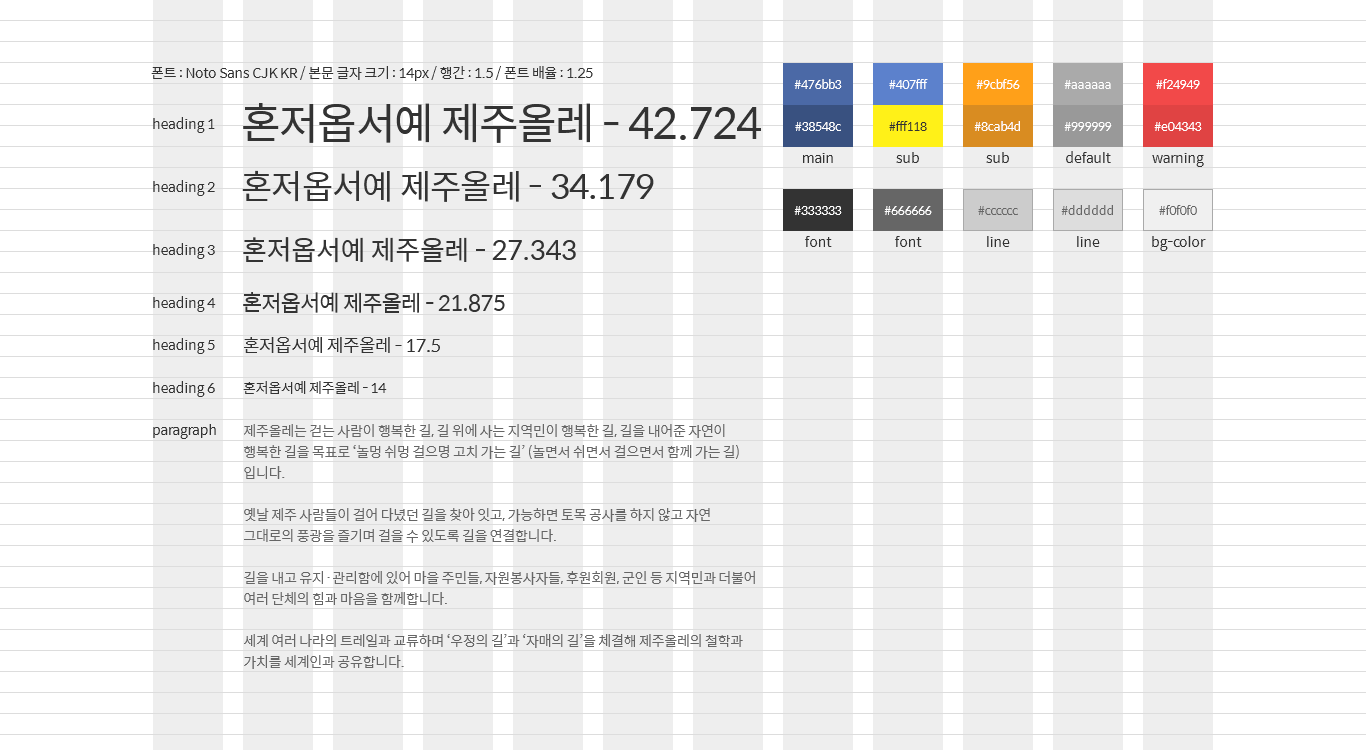
<style>
.page{position:relative;width:1366px;height:750px;background:#eeeeee}
.page>*{position:absolute;margin:0}
.t1{font:14px "SpoqaHanSans-Regular";letter-spacing:-0.025em;color:#333333}
.t2{font:12px "SpoqaHanSans-Regular";letter-spacing:-0.025em;color:#ffffff}
.t3{font:42.7px "SpoqaHanSans-Regular";letter-spacing:-0.025em;color:#333333}
.t4{font:12px "SpoqaHanSans-Regular";letter-spacing:-0.025em;color:#333333}
.t5{font:34.2px "SpoqaHanSans-Regular";letter-spacing:-0.025em;color:#333333}
.t6{font:12px "SpoqaHanSans-Regular";letter-spacing:-0.025em;color:#666666}
.t7{font:27.3px "SpoqaHanSans-Regular";letter-spacing:-0.025em;color:#333333}
.t8{font:21.9px "SpoqaHanSans-Regular";letter-spacing:-0.025em;color:#333333}
.t9{font:17.5px "SpoqaHanSans-Regular";letter-spacing:-0.025em;color:#333333}
.t10{font:14px "SpoqaHanSans-Regular";letter-spacing:-0.025em;color:#666666}
</style>
<div class="page">
<p class="t1" style="left:151px;top:66px;width:442px;height:15px">폰트 : Noto Sans CJK KR / 본문 글자 크기 : 14px / 행간 : 1.5 / 폰트 배율 : 1.25</p>
<p class="t2" style="left:794px;top:79px;width:48px;height:10px">#476bb3</p>
<p class="t2" style="left:889px;top:79px;width:39px;height:10px">#407fff</p>
<p class="t2" style="left:976px;top:79px;width:44px;height:10px">#9cbf56</p>
<p class="t2" style="left:1064px;top:80px;width:47px;height:9px">#aaaaaa</p>
<p class="t2" style="left:1156px;top:79px;width:44px;height:10px">#f24949</p>
<p class="t3" style="left:243px;top:103px;width:518px;height:40px">혼저옵서예 제주올레 - 42.724</p>
<p class="t1" style="left:153px;top:117px;width:62px;height:16px">heading 1</p>
<p class="t2" style="left:795px;top:122px;width:46px;height:9px">#38548c</p>
<p class="t4" style="left:889px;top:121px;width:38px;height:10px">#fff118</p>
<p class="t2" style="left:974px;top:121px;width:46px;height:10px">#8cab4d</p>
<p class="t2" style="left:1064px;top:122px;width:48px;height:9px">#999999</p>
<p class="t2" style="left:1154px;top:122px;width:48px;height:9px">#e04343</p>
<p class="t1" style="left:803px;top:153px;width:30px;height:10px">main</p>
<p class="t1" style="left:896px;top:152px;width:23px;height:11px">sub</p>
<p class="t1" style="left:986px;top:152px;width:23px;height:11px">sub</p>
<p class="t1" style="left:1066px;top:151px;width:45px;height:12px">default</p>
<p class="t1" style="left:1152px;top:153px;width:52px;height:14px">warning</p>
<p class="t5" style="left:242px;top:170px;width:412px;height:32px">혼저옵서예 제주올레 - 34.179</p>
<p class="t1" style="left:153px;top:180px;width:62px;height:16px">heading 2</p>
<p class="t2" style="left:794px;top:206px;width:48px;height:9px">#333333</p>
<p class="t2" style="left:884px;top:206px;width:48px;height:9px">#666666</p>
<p class="t6" style="left:978px;top:206px;width:40px;height:9px">#cccccc</p>
<p class="t6" style="left:1061px;top:205px;width:52px;height:10px">#dddddd</p>
<p class="t6" style="left:1159px;top:205px;width:38px;height:10px">#f0f0f0</p>
<p class="t1" style="left:153px;top:243px;width:62px;height:16px">heading 3</p>
<p class="t7" style="left:243px;top:237px;width:333px;height:26px">혼저옵서예 제주올레 - 27.343</p>
<p class="t1" style="left:805px;top:236px;width:27px;height:11px">font</p>
<p class="t1" style="left:895px;top:236px;width:27px;height:11px">font</p>
<p class="t1" style="left:987px;top:236px;width:23px;height:11px">line</p>
<p class="t1" style="left:1077px;top:236px;width:23px;height:11px">line</p>
<p class="t1" style="left:1152px;top:236px;width:54px;height:15px">bg-color</p>
<p class="t8" style="left:243px;top:292px;width:262px;height:22px">혼저옵서예 제주올레 - 21.875</p>
<p class="t1" style="left:153px;top:296px;width:63px;height:16px">heading 4</p>
<p class="t1" style="left:153px;top:338px;width:62px;height:16px">heading 5</p>
<p class="t9" style="left:244px;top:337px;width:196px;height:16px">혼저옵서예 제주올레 - 17.5</p>
<p class="t1" style="left:153px;top:381px;width:62px;height:16px">heading 6</p>
<p class="t1" style="left:243px;top:381px;width:144px;height:13px">혼저옵서예 제주올레 - 14</p>
<p class="t1" style="left:153px;top:424px;width:63px;height:15px">paragraph</p>
<p class="t10" style="left:244px;top:424px;width:511px;height:245px">제주올레는 걷는 사람이 행복한 길, 길 위에 사는 지역민이 행복한 길, 길을 내어준 자연이 행복한 길을 목표로 ‘놀멍 쉬멍 걸으명 고치 가는 길’ (놀면서 쉬면서 걸으면서 함께 가는 길) 입니다.<br>옛날 제주 사람들이 걸어 다녔던 길을 찾아 잇고, 가능하면 토목 공사를 하지 않고 자연 그대로의 풍광을 즐기며 걸을 수 있도록 길을 연결합니다.<br>길을 내고 유지·관리함에 있어 마을 주민들, 자원봉사자들, 후원회원, 군인 등 지역민과 더불어 여러 단체의 힘과 마음을 함께합니다.<br>세계 여러 나라의 트레일과 교류하며 ‘우정의 길’과 ‘자매의 길’을 체결해 제주올레의 철학과 가치를 세계인과 공유합니다.</p>
</div>
